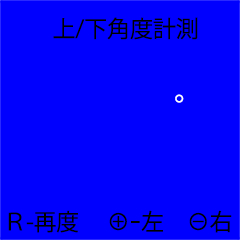
<style>
.page{position:relative;width:240px;height:240px;background:#0000ff}
.page>*{position:absolute;margin:0}
.t1{font:23.1px "KozGoPr6N-Regular";color:#000000}
.t2{font:30px "KozGoPr6N-Regular";color:#ffffff}
</style>
<div class="page">
<p class="t1" style="left:53px;top:17px;width:145px;height:23px">上/下角度計測</p>
<p class="t2" style="left:175px;top:94px;width:9px;height:9px">°</p>
<p class="t1" style="left:8px;top:210px;width:70px;height:23px">Ｒ-再度</p>
<p class="t1" style="left:109px;top:210px;width:123px;height:23px">⊕ｰ左　⊖右</p>
</div>
